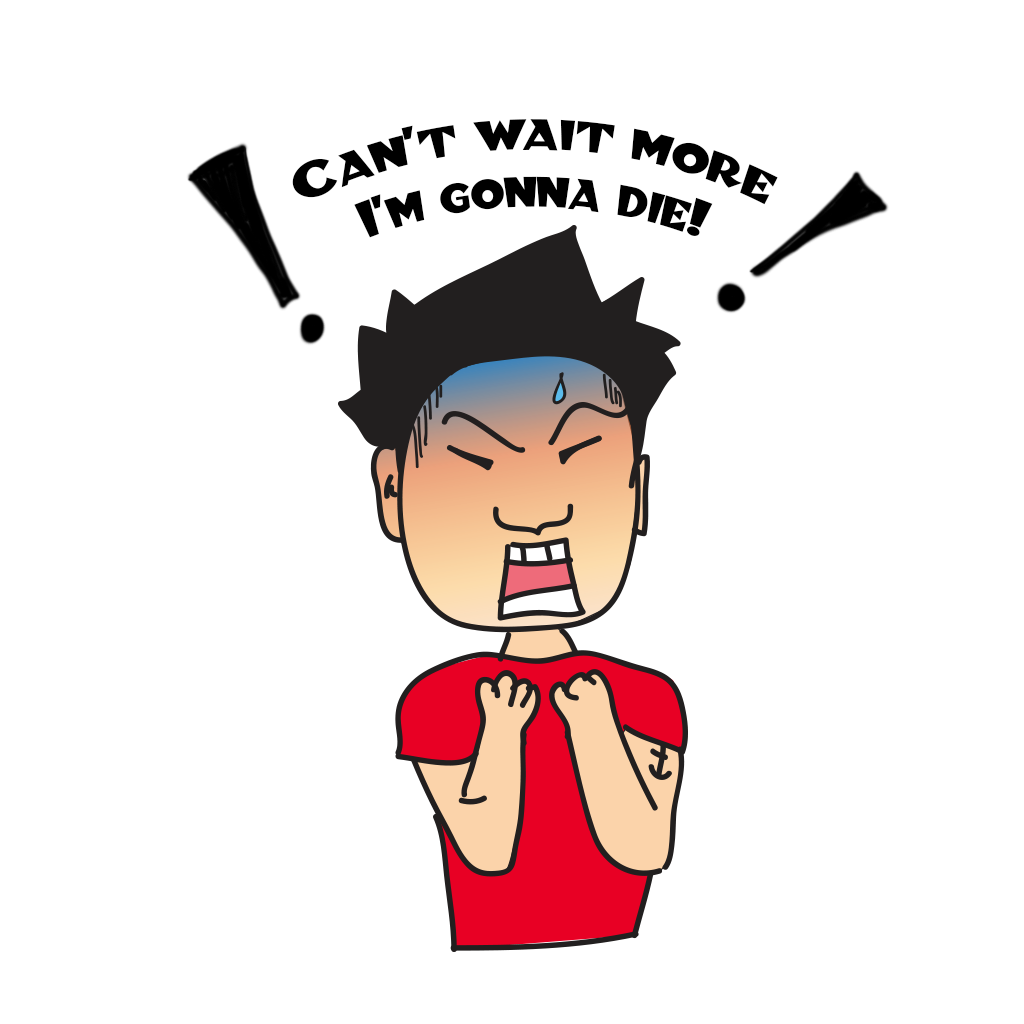
<style>
.page{position:relative;width:1024px;height:1024px;background:#ffffff}
.page>*{position:absolute;margin:0}
.t1{font:48px "BlitzkriegNF";color:#000000}
</style>
<div class="page">
<p class="t1" style="left:292px;top:119px;width:486px;height:119px;text-align:center">Can’t wait more<br>I’m gonna die!</p>
</div>
